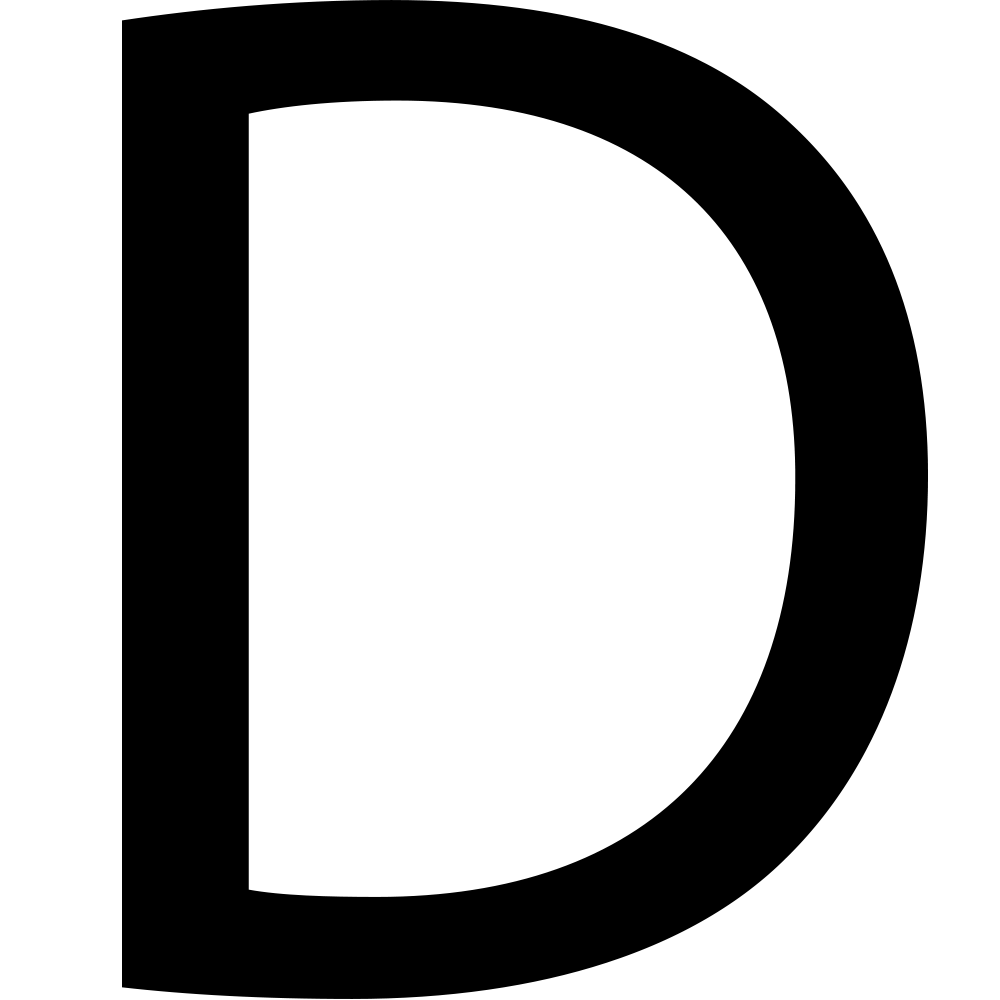
<style>
.page{position:relative;width:1000px;height:1000px;background:#ffffff}
.page>*{position:absolute;margin:0}
.t1{font:1458.3px "MyriadPro-Regular";color:#000000}
</style>
<div class="page">
<p class="t1" style="left:122px;top:0px;width:806px;height:999px">D</p>
</div>
